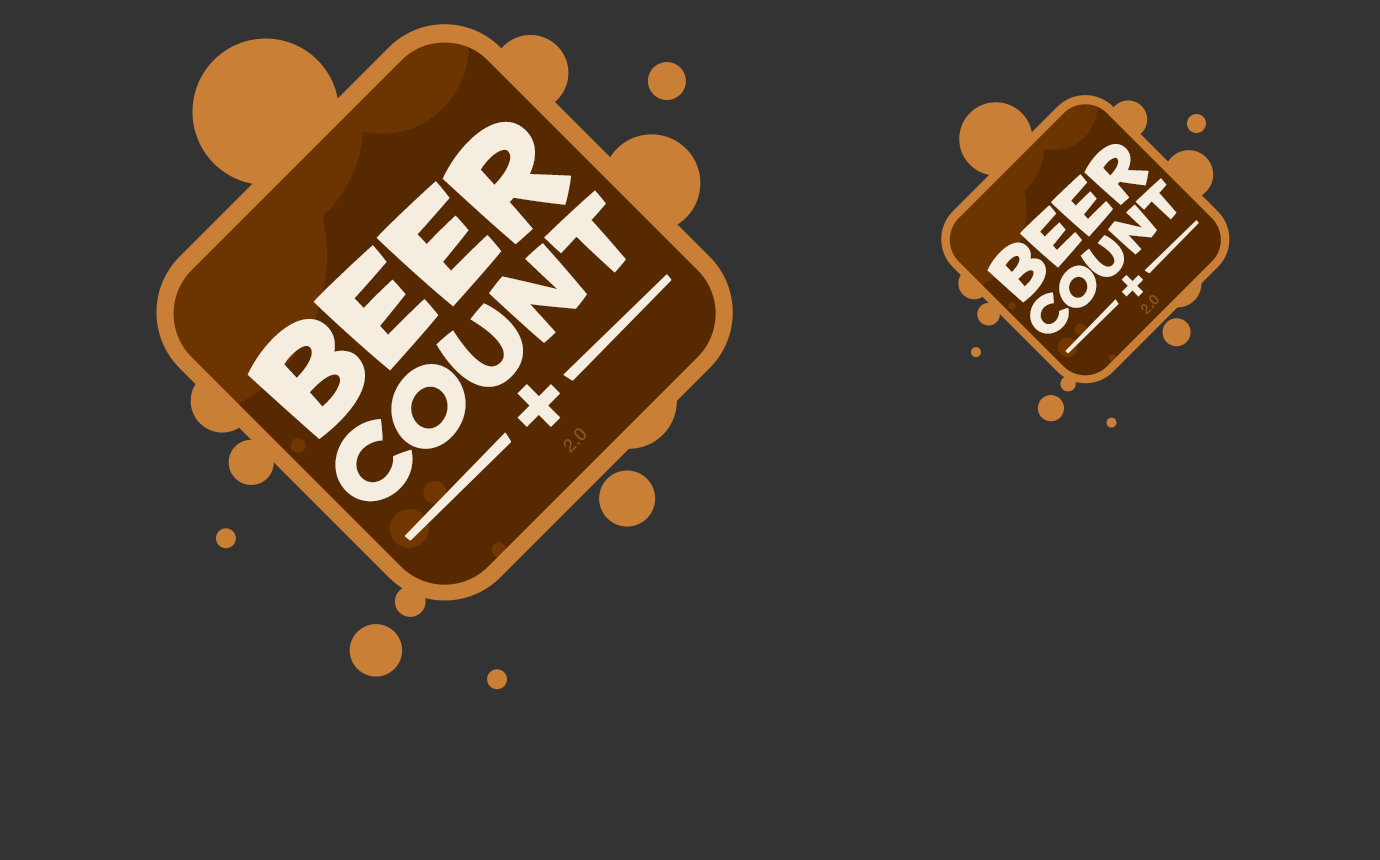
<style>
.page{position:relative;width:1380px;height:860px;background:#333333}
.page>*{position:absolute;margin:0}
.t1{font:134.6px "House-A-Rama-Kingpin";color:#f5eddf}
.t2{font:67.3px "House-A-Rama-Kingpin";color:#f5eddf}
.t3{font:48.6px "House-A-Rama-Kingpin";color:#f5eddf}
.t4{font:97.2px "House-A-Rama-Kingpin";color:#f5eddf}
.t5{font:80.1px "HouseGothic-BoldFour";color:#f5eddf}
.t6{font:14px "HelveticaNeue-Medium";color:#855224;text-transform:uppercase}
.t7{font:160.2px "HouseGothic-BoldFour";color:#f5eddf}
.t8{font:18px "HelveticaNeue";color:#8a5627}
</style>
<div class="page">
<p class="t1" style="left:247px;top:121px;width:324px;height:318px;rotate:-45deg">Beer</p>
<p class="t2" style="left:987px;top:144px;width:162px;height:159px;rotate:-45deg">Beer</p>
<p class="t3" style="left:1030px;top:178px;width:147px;height:156px;rotate:-45deg">Count</p>
<p class="t4" style="left:335px;top:190px;width:291px;height:312px;rotate:-45deg">Count</p>
<p class="t5" style="left:1121px;top:275px;width:22px;height:22px;rotate:-45deg">+</p>
<p class="t6" style="left:1141px;top:295px;width:18px;height:20px;rotate:-45deg">2.0</p>
<p class="t7" style="left:517px;top:384px;width:44px;height:43px;rotate:-45deg">+</p>
<p class="t8" style="left:563px;top:428px;width:23px;height:25px;rotate:-45deg">2.0</p>
</div>
